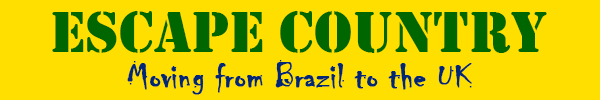
<style>
.page{position:relative;width:600px;height:100px;background:#fedf00}
.page>*{position:absolute;margin:0}
.t1{font:60px "Stencil";color:#006600}
.t2{font:36px "Chiller-Regular";color:#002776;font-weight:bold}
</style>
<div class="page">
<p class="t1" style="left:52px;top:11px;width:495px;height:42px">ESCAPE COUNTRY</p>
<p class="t2" style="left:127px;top:60px;width:345px;height:35px">Moving from Brazil to the UK</p>
</div>
